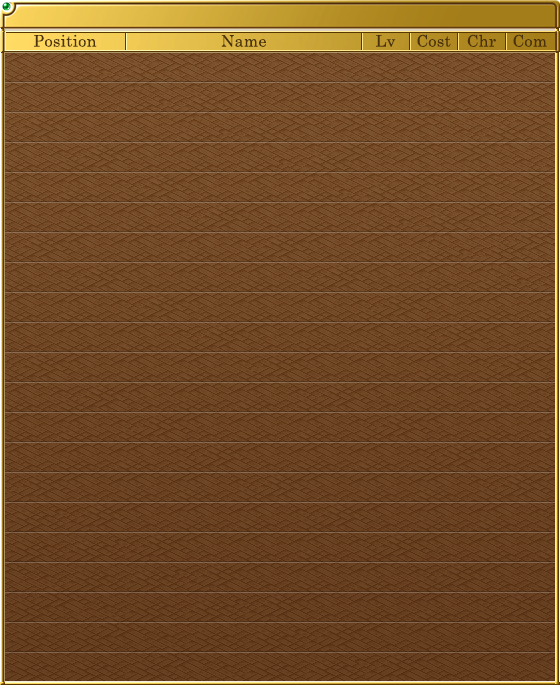
<style>
.page{position:relative;width:560px;height:685px}
.page>*{position:absolute;margin:0}
.t1{font:16px "CenturySchoolbook";letter-spacing:0.025em;color:#4b320e}
</style>
<div class="page">
<p class="t1" style="left:34px;top:34px;width:63px;height:13px">Position</p>
<p class="t1" style="left:221px;top:35px;width:45px;height:12px">Name</p>
<p class="t1" style="left:376px;top:35px;width:20px;height:12px">Lv</p>
<p class="t1" style="left:417px;top:34px;width:34px;height:13px">Cost</p>
<p class="t1" style="left:467px;top:34px;width:29px;height:13px">Chr</p>
<p class="t1" style="left:513px;top:34px;width:34px;height:13px">Com</p>
</div>
